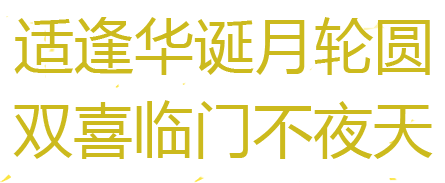
<style>
.page{position:relative;width:445px;height:183px;background:#ffffff}
.page>*{position:absolute;margin:0}
.t1{font:60px "MicrosoftYaHei";color:#ccba1d}
</style>
<div class="page">
<p class="t1" style="left:14px;top:17px;width:416px;height:58px">适逢华诞月轮圆</p>
<p class="t1" style="left:13px;top:100px;width:420px;height:59px">双喜临门不夜天</p>
</div>
